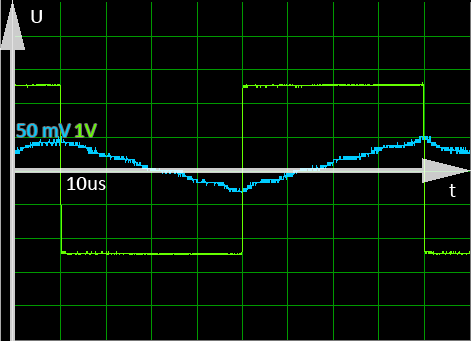
<style>
.page{position:relative;width:471px;height:341px;background:#000000}
.page>*{position:absolute;margin:0}
.t1{font:36px "Calibri";color:#ffffff}
.t2{font:36px "Calibri";color:#00ccff}
.t3{font:36px "Calibri";color:#66ff00}
</style>
<div class="page">
<p class="t1" style="left:31px;top:10px;width:11px;height:13px">U</p>
<p class="t2" style="left:17px;top:124px;width:54px;height:13px">50 mV</p>
<p class="t3" style="left:75px;top:124px;width:22px;height:13px">1V</p>
<p class="t1" style="left:67px;top:177px;width:39px;height:13px">10us</p>
<p class="t1" style="left:449px;top:184px;width:7px;height:13px">t</p>
</div>
